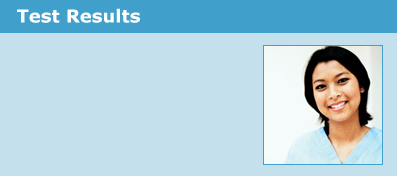
<style>
.page{position:relative;width:397px;height:176px;background:#c4e0ec}
.page>*{position:absolute;margin:0}
.t1{font:18px "Verdana-Bold";color:#fffffd}
</style>
<div class="page">
<p class="t1" style="left:17px;top:8px;width:123px;height:15px">Test Results</p>
</div>
